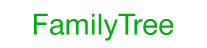
<style>
.page{position:relative;width:207px;height:48px;background:#ffffff}
.page>*{position:absolute;margin:0}
.t1{font:29.2px "HelveticaNeueCyr-Roman";letter-spacing:0.01em;color:#00ac0e}
</style>
<div class="page">
<p class="t1" style="left:34px;top:13px;width:140px;height:28px">FamilyTree</p>
</div>
